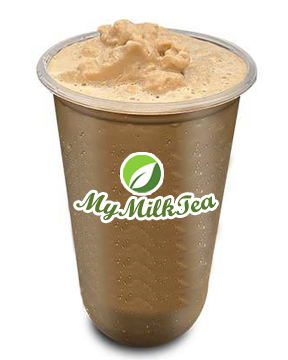
<style>
.page{position:relative;width:288px;height:360px;background:#ffffff}
.page>*{position:absolute;margin:0}
.t1{font:25.5px "ScriptMTBold";color:#577a28}
</style>
<div class="page">
<p class="t1" style="left:76px;top:192px;width:140px;height:29px">MyMilkTea</p>
</div>
